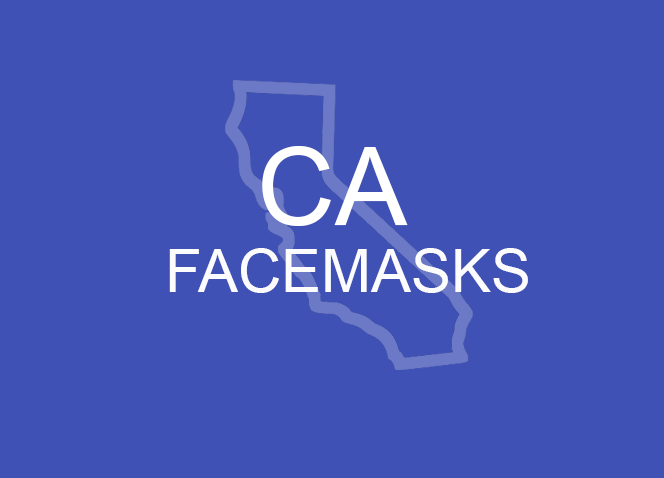
<style>
.page{position:relative;width:664px;height:478px;background:#3f51b5}
.page>*{position:absolute;margin:0}
.t1{font:108px "ArialMT";color:#ffffff}
.t2{font:60px "ArialMT";color:#ffffff}
</style>
<div class="page">
<p class="t1" style="left:262px;top:146px;width:146px;height:80px">CA</p>
<p class="t2" style="left:169px;top:248px;width:359px;height:45px">FACEMASKS</p>
</div>
